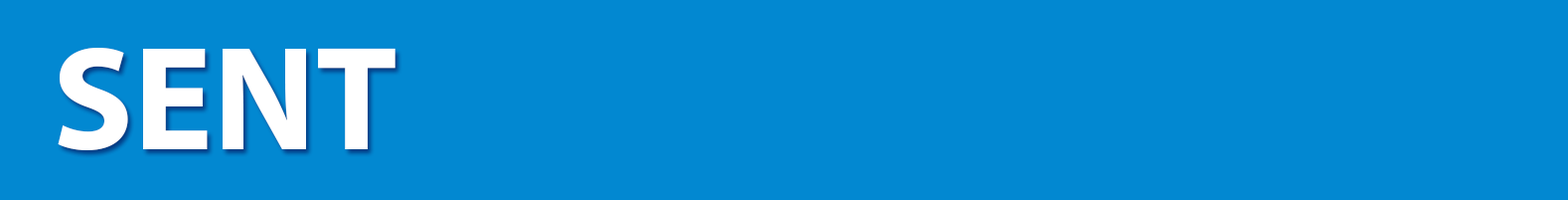
<style>
.page{position:relative;width:1568px;height:200px;background:#0288d1}
.page>*{position:absolute;margin:0}
.t1{font:149px "MyriadPro-Bold";color:#ffffff}
</style>
<div class="page">
<p class="t1" style="left:58px;top:48px;width:337px;height:102px">SENT</p>
</div>
